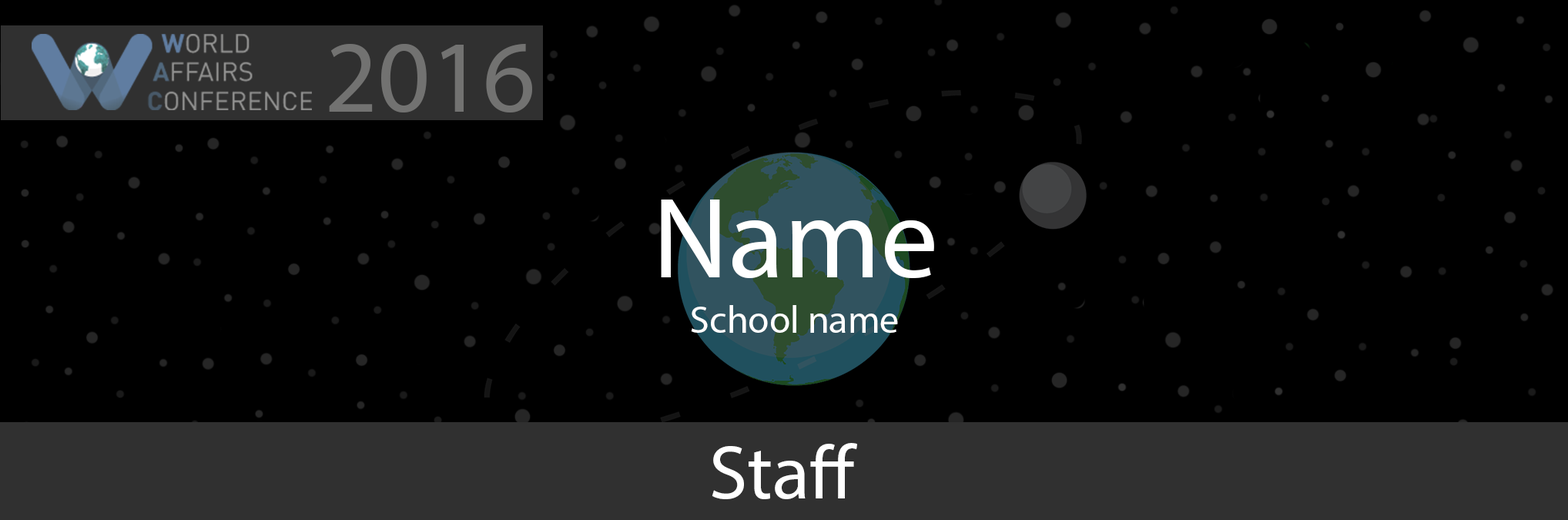
<style>
.page{position:relative;width:1568px;height:520px;background:#000000}
.page>*{position:absolute;margin:0}
.t1{font:102.7px "MyriadPro-Regular";color:#727271}
.t2{font:115.5px "MyriadPro-Regular";color:#ffffff}
.t3{font:38.5px "MyriadPro-Regular";color:#ffffff}
.t4{font:77px "MyriadPro-Regular";color:#ffffff}
</style>
<div class="page">
<p class="t1" style="left:329px;top:43px;width:203px;height:69px">2016</p>
<p class="t2" style="left:661px;top:199px;width:273px;height:79px">Name</p>
<p class="t3" style="left:691px;top:305px;width:207px;height:28px">School name</p>
<p class="t4" style="left:712px;top:443px;width:145px;height:56px">Staff</p>
</div>
